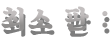
<style>
.page{position:relative;width:111px;height:40px;background:#ffffff}
.page>*{position:absolute;margin:0}
.t1{font:26.9px "SDKukdetopokki-bBd";letter-spacing:0.08em;color:#9f9c9c}
</style>
<div class="page">
<p class="t1" style="left:1px;top:6px;width:107px;height:25px">최소 판 :</p>
</div>
